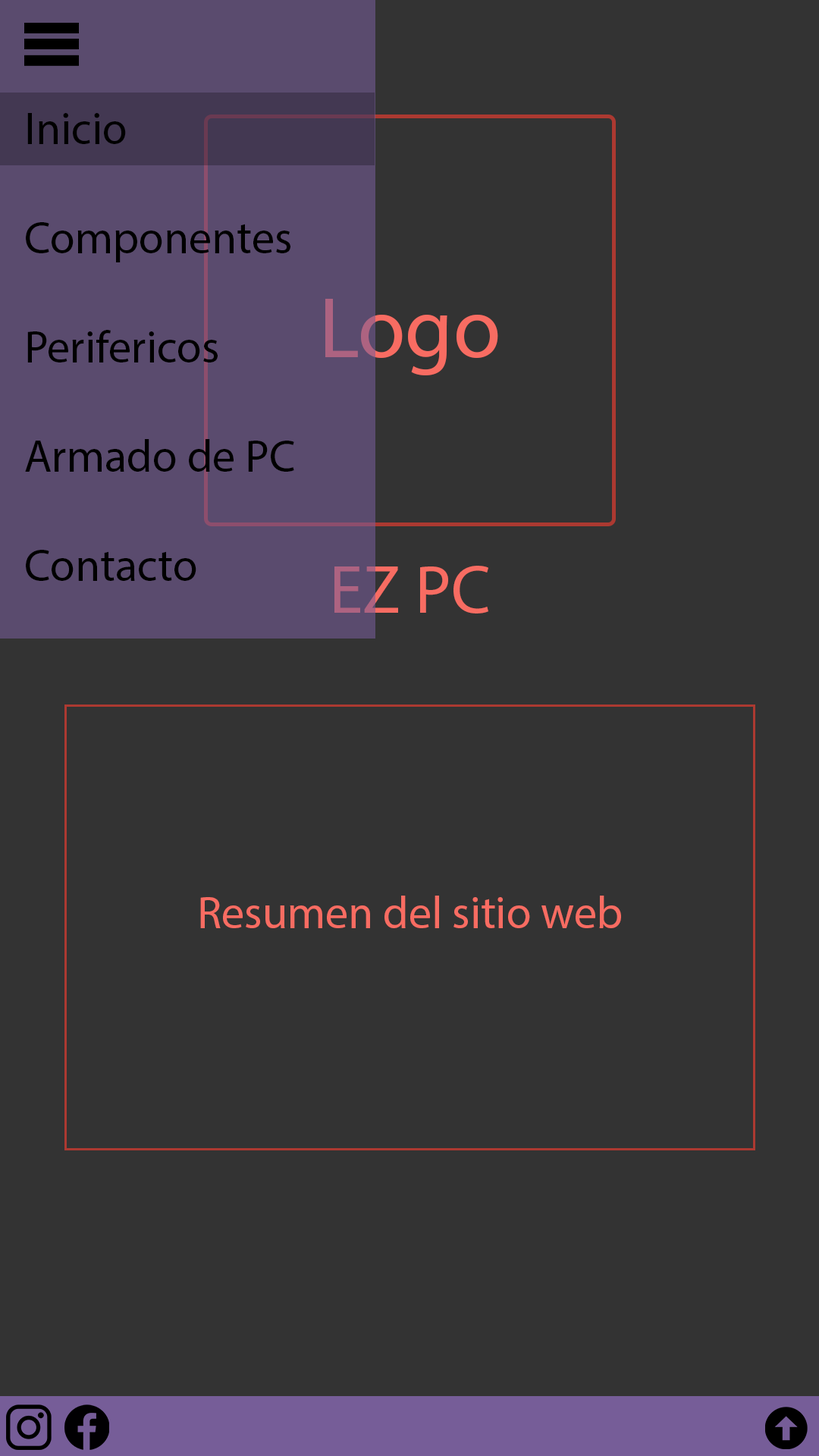
<style>
.page{position:relative;width:819px;height:1456px;background:#333333}
.page>*{position:absolute;margin:0}
.t1{font:45.5px "MyriadPro-Regular";color:#000000}
.t2{font:86.4px "MyriadPro-Regular";color:#f86c62}
.t3{font:68.2px "MyriadPro-Regular";color:#f86c62}
.t4{font:45.5px "MyriadPro-Regular";color:#f86c62}
</style>
<div class="page">
<p class="t1" style="left:25px;top:113px;width:269px;height:468px">Inicio<br><br>Componentes<br><br>Perifericos<br><br>Armado de PC<br><br>Contacto</p>
<p class="t2" style="left:325px;top:299px;width:173px;height:76px">Logo</p>
<p class="t3" style="left:334px;top:566px;width:154px;height:47px">EZ PC</p>
<p class="t4" style="left:200px;top:896px;width:421px;height:32px">Resumen del sitio web</p>
</div>
